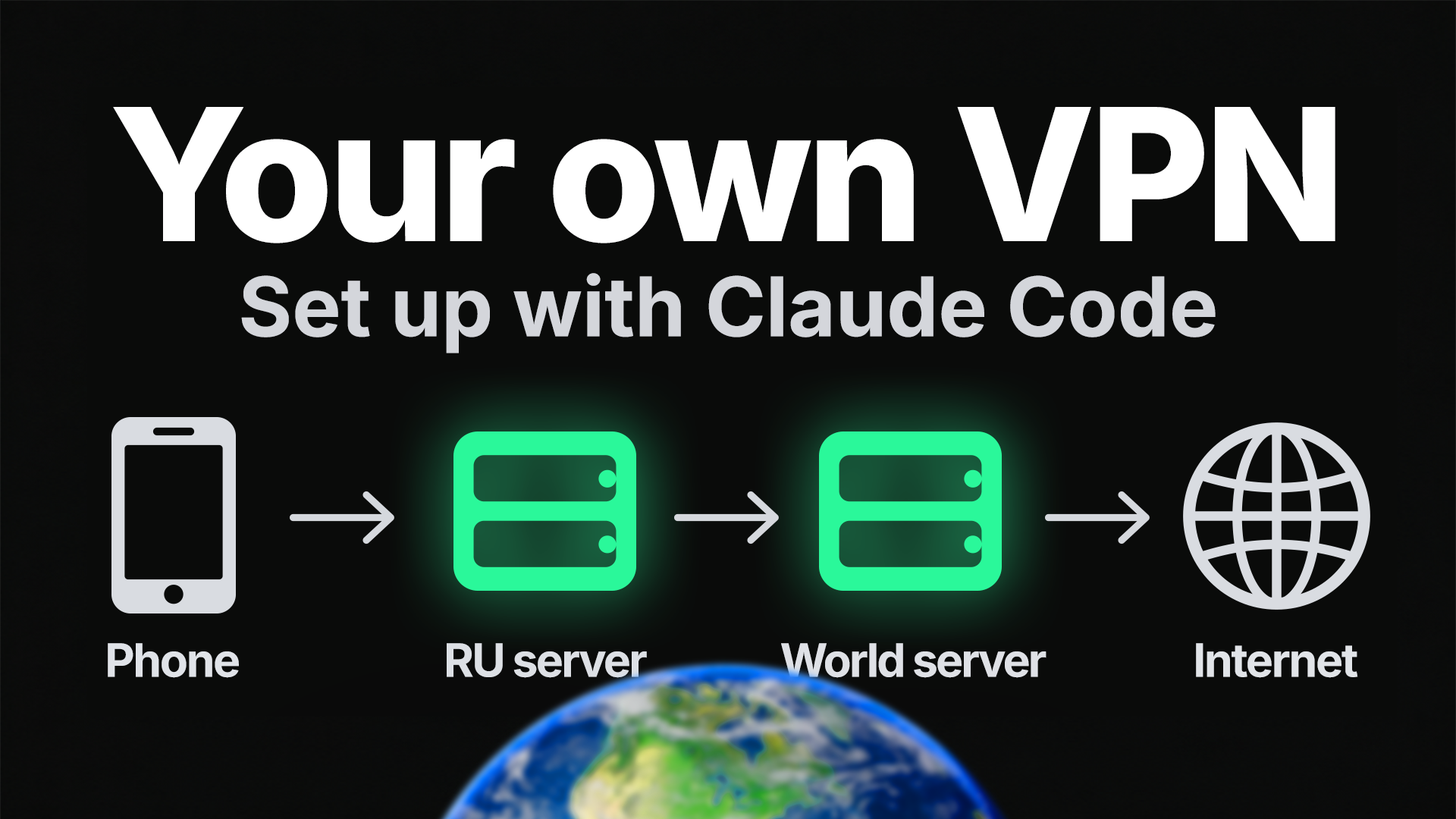
<style>
.page{position:relative;width:1456px;height:819px;background:#0a0b0a}
.page>*{position:absolute;margin:0}
.t1{font:184.1px "Inter-ExtraBold";letter-spacing:-0.029em;color:#ffffff}
.t2{font:82px "Inter-Bold";color:#d4d6db}
.t3{font:46px "Inter-Bold";letter-spacing:-0.038em;color:#e0e3e8}
.t4{font:46px "Inter-Bold";letter-spacing:-0.045em;color:#dde0e5}
.t5{font:46px "Inter-Bold";letter-spacing:-0.048em;color:#dfe1e6}
.t6{font:46px "Inter-Bold";letter-spacing:-0.038em;color:#e1e4e8}
</style>
<div class="page">
<p class="t1" style="left:113px;top:107px;width:1222px;height:136px">Your own VPN</p>
<p class="t2" style="left:241px;top:273px;width:975px;height:80px">Set up with Claude Code</p>
<p class="t3" style="left:108px;top:643px;width:131px;height:35px">Phone</p>
<p class="t4" style="left:447px;top:643px;width:200px;height:35px">RU server</p>
<p class="t5" style="left:781px;top:643px;width:265px;height:35px">World server</p>
<p class="t6" style="left:1196px;top:643px;width:162px;height:35px">Internet</p>
</div>
